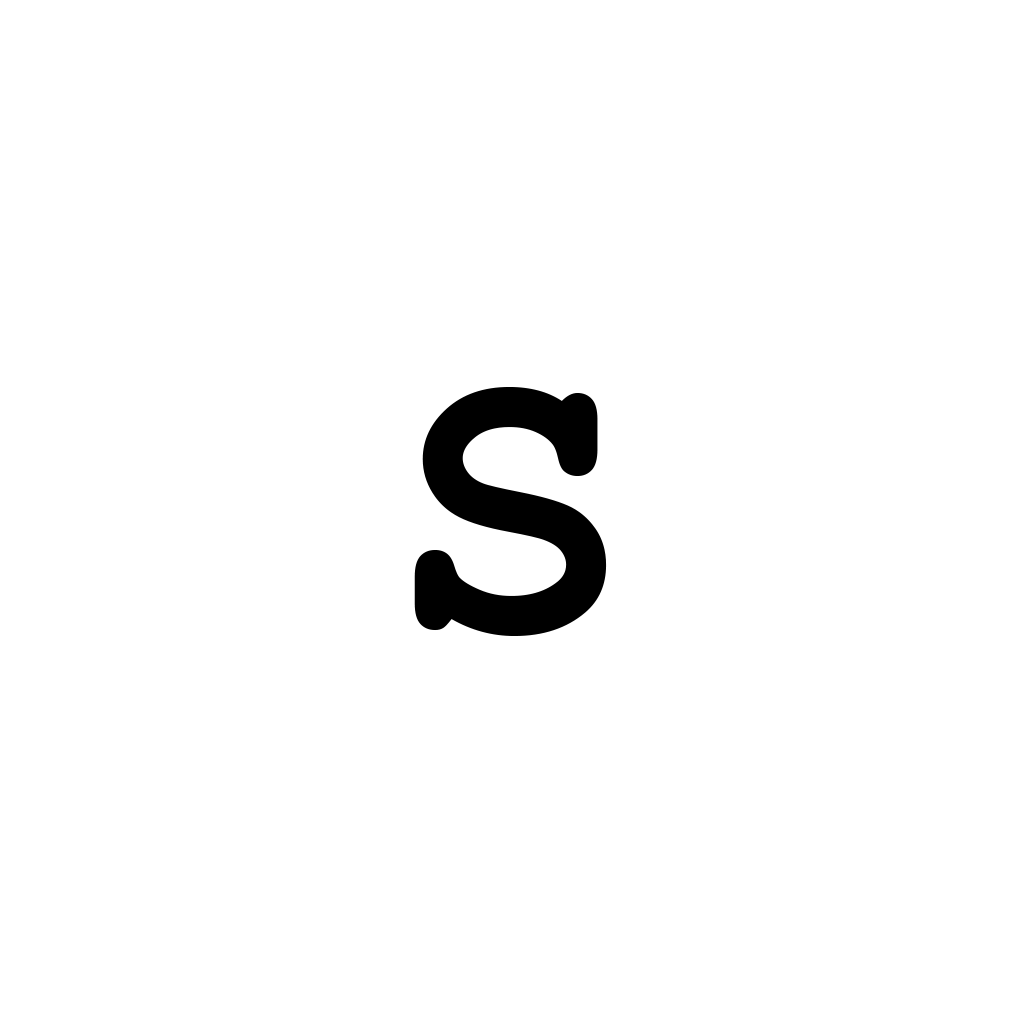
<style>
.page{position:relative;width:1022px;height:1024px;background:#ffffff}
.page>*{position:absolute;margin:0}
.t1{font:400px "CourierNewPS-BoldMT";color:#000000}
</style>
<div class="page">
<p class="t1" style="left:414px;top:387px;width:193px;height:249px">S</p>
</div>
